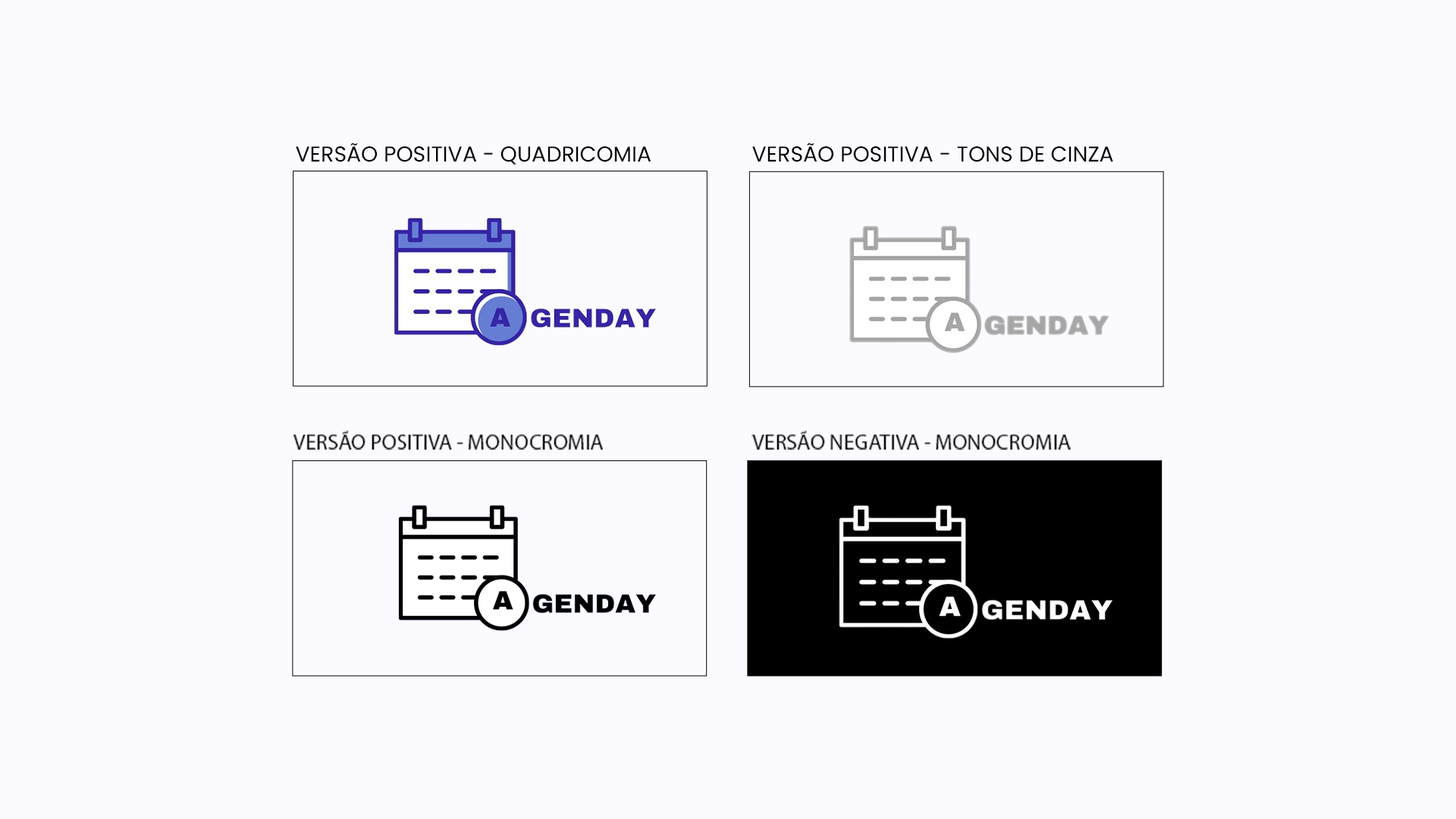
<style>
.page{position:relative;width:1456px;height:819px;background:#fbfbff}
.page>*{position:absolute;margin:0}
.t1{font:21.5px "Poppins-Regular";color:#000000}
</style>
<div class="page">
<p class="t1" style="left:296px;top:143px;width:355px;height:22px">VERSÃO POSITIVA - QUADRICOMIA</p>
<p class="t1" style="left:752px;top:143px;width:361px;height:19px">VERSÃO POSITIVA - TONS DE CINZA</p>
<p class="t1" style="left:293px;top:431px;width:310px;height:19px">VERSÃO POSITIVA - MONOCROMIA</p>
<p class="t1" style="left:751px;top:431px;width:320px;height:19px">VERSÃO NEGATIVA - MONOCROMIA</p>
</div>
